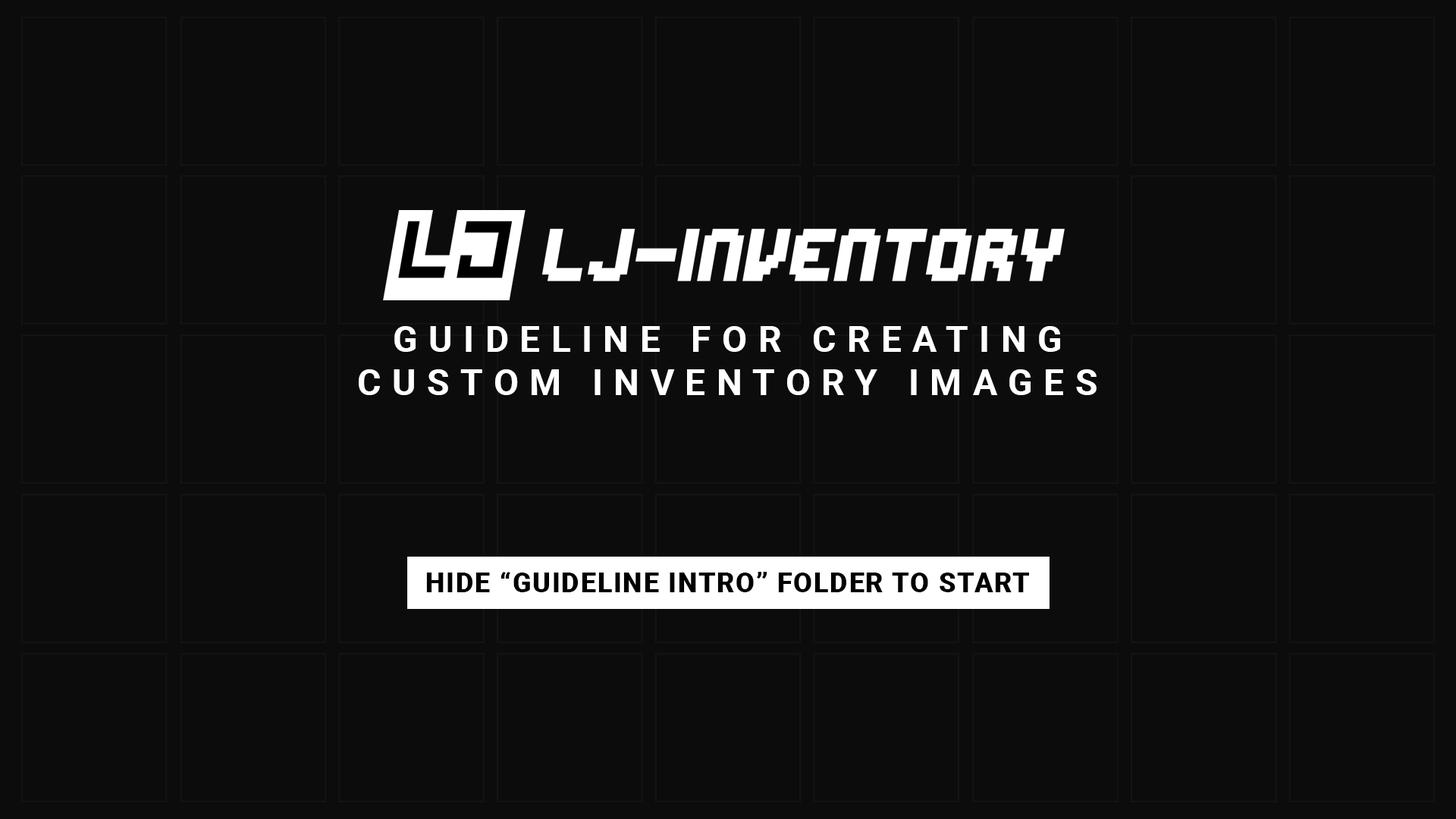
<style>
.page{position:relative;width:1456px;height:819px;background:#0c0c0c}
.page>*{position:absolute;margin:0}
.t1{font:36.4px "Roboto-Bold";letter-spacing:0.3em;color:#ffffff}
.t2{font:27.3px "Roboto-Black";letter-spacing:0.05em;color:#000000}
</style>
<div class="page">
<p class="t1" style="left:359px;top:326px;width:738px;height:69px;text-align:center">GUIDELINE FOR CREATING <br>CUSTOM INVENTORY IMAGES</p>
<p class="t2" style="left:426px;top:572px;width:603px;height:20px">HIDE “GUIDELINE INTRO” FOLDER TO START</p>
</div>
